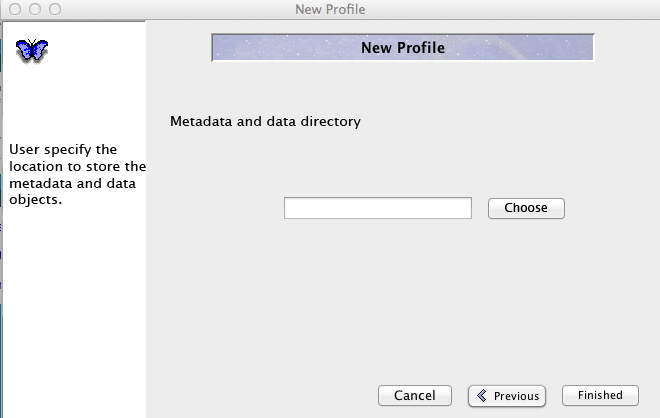
<style>
.page{position:relative;width:660px;height:418px;background:#ededed}
.page>*{position:absolute;margin:0}
.t1{font:14px "LucidaGrande";color:#000000}
.t2{font:12px "LucidaGrande";color:#000000}
</style>
<div class="page">
<p class="t1" style="left:171px;top:116px;width:190px;height:13px">Metadata and data directory</p>
<p class="t1" style="left:9px;top:144px;width:137px;height:63px">User specify the <br>location to store the<br>metadata and data <br>objects.</p>
<p class="t2" style="left:505px;top:203px;width:42px;height:9px">Choose</p>
</div>
